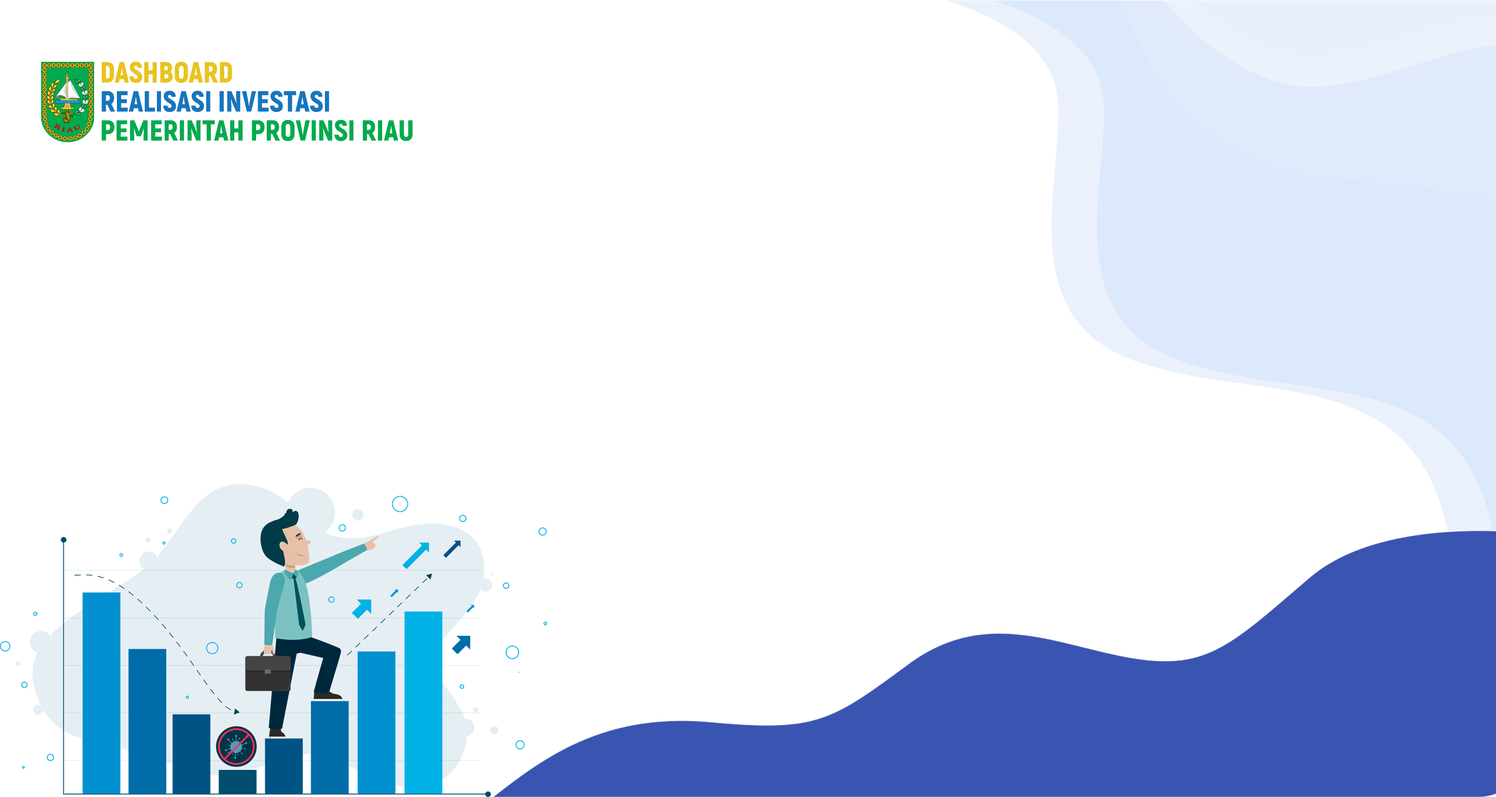
<style>
.page{position:relative;width:1496px;height:797px;background:#ffffff}
.page>*{position:absolute;margin:0}
.t1{font:29.1px/29.1px "Akrobat-Black";color:#00ab4e;text-transform:uppercase}
.t2{font:29.1px/29.1px "Akrobat-Black";color:#e9c31e;text-transform:uppercase}
.t3{font:29.1px/29.1px "Akrobat-Black";color:#1676bd;text-transform:uppercase}
</style>
<div class="page">
<p class="t1" style="left:102px;top:61px;width:311px;height:80px"><span class="t2">dashboard<br></span><span class="t3">realisasi investasi<br></span>pemerintah provinsi riau</p>
</div>
